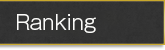
<style>
.page{position:relative;width:165px;height:50px}
.page>*{position:absolute;margin:0}
.t1{font:20px "GothicMB101Pro-Light";color:#fbfbf9}
</style>
<div class="page">
<p class="t1" style="left:17px;top:14px;width:79px;height:19px">Ranking</p>
</div>
